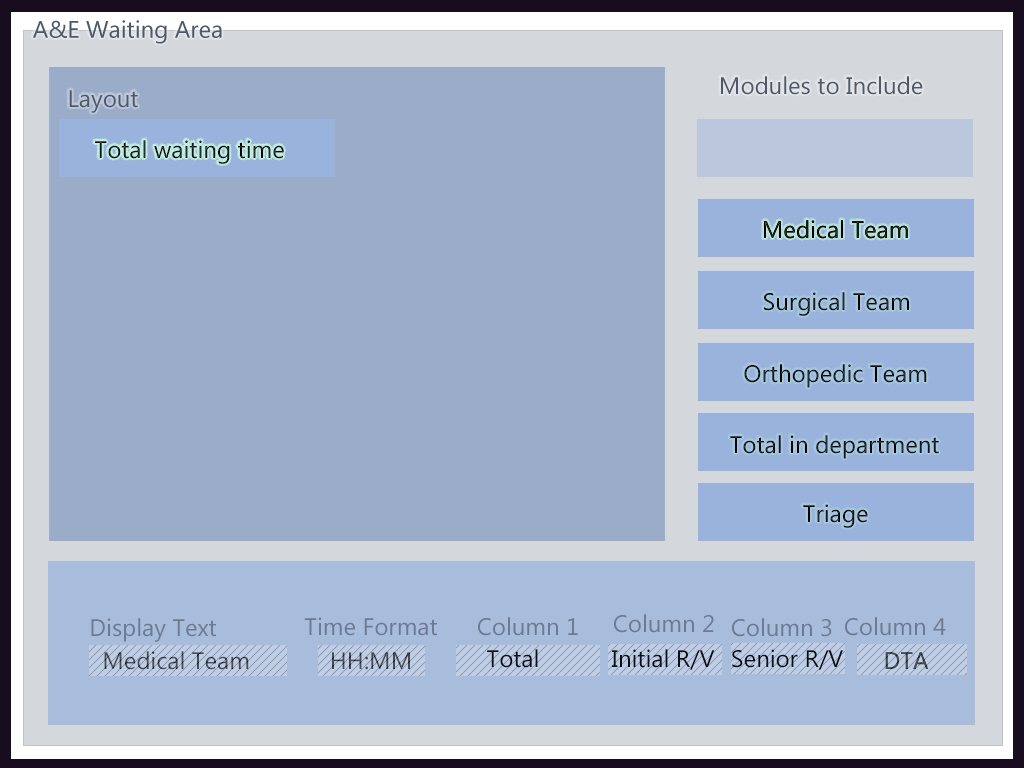
<style>
.page{position:relative;width:1024px;height:768px;background:#9bacc8}
.page>*{position:absolute;margin:0}
.t1{font:24px "MicrosoftNewTaiLue";color:#4d586a}
.t2{font:24px "MicrosoftNewTaiLue"}
.t3{font:24px "MicrosoftNewTaiLue";color:#0a0b0d}
.t4{font:24px "MicrosoftNewTaiLue";color:#0e1114}
.t5{font:24px "MicrosoftNewTaiLue";color:#6d7b92}
.t6{font:24px "MicrosoftNewTaiLue";color:#494c53}
.t7{font:24px "MicrosoftNewTaiLue";color:#090e17}
</style>
<div class="page">
<p class="t1" style="left:721px;top:76px;width:202px;height:19px">Modules to Include</p>
<p class="t1" style="left:69px;top:90px;width:69px;height:23px">Layout</p>
<p class="t2" style="left:95px;top:140px;width:189px;height:24px">Total waiting time</p>
<p class="t3" style="left:764px;top:220px;width:144px;height:19px">Medical Team</p>
<p class="t3" style="left:764px;top:220px;width:144px;height:19px">Medical Team</p>
<p class="t3" style="left:764px;top:220px;width:144px;height:19px">Medical Team</p>
<p class="t4" style="left:764px;top:292px;width:145px;height:24px">Surgical Team</p>
<p class="t2" style="left:744px;top:364px;width:183px;height:24px">Orthopedic Team</p>
<p class="t4" style="left:730px;top:435px;width:209px;height:24px">Total in department</p>
<p class="t4" style="left:803px;top:504px;width:65px;height:24px">Triage</p>
<p class="t5" style="left:304px;top:617px;width:133px;height:19px">Time Format</p>
<p class="t5" style="left:478px;top:617px;width:100px;height:19px">Column 1</p>
<p class="t5" style="left:614px;top:614px;width:100px;height:19px">Column 2</p>
<p class="t5" style="left:845px;top:617px;width:101px;height:19px">Column 4</p>
<p class="t5" style="left:91px;top:618px;width:125px;height:24px">Display Text</p>
<p class="t5" style="left:732px;top:618px;width:100px;height:19px">Column 3</p>
<p class="t6" style="left:104px;top:651px;width:145px;height:19px">Medical Team</p>
<p class="t6" style="left:332px;top:652px;width:78px;height:18px">HH:MM</p>
<p class="t7" style="left:487px;top:649px;width:51px;height:19px">Total</p>
<p class="t7" style="left:612px;top:649px;width:103px;height:21px">Initial R/V</p>
<p class="t7" style="left:732px;top:649px;width:111px;height:21px">Senior R/V</p>
<p class="t6" style="left:885px;top:652px;width:44px;height:17px">DTA</p>
<p class="t6" style="left:885px;top:652px;width:44px;height:17px">DTA</p>
</div>
